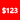
<style>
.page{position:relative;width:20px;height:20px;background:#ff0000}
.page>*{position:absolute;margin:0}
.t1{font:7px "SegoeUI-Bold";color:#ffffff}
</style>
<div class="page">
<p class="t1" style="left:2px;top:7px;width:16px;height:7px">$123</p>
</div>
